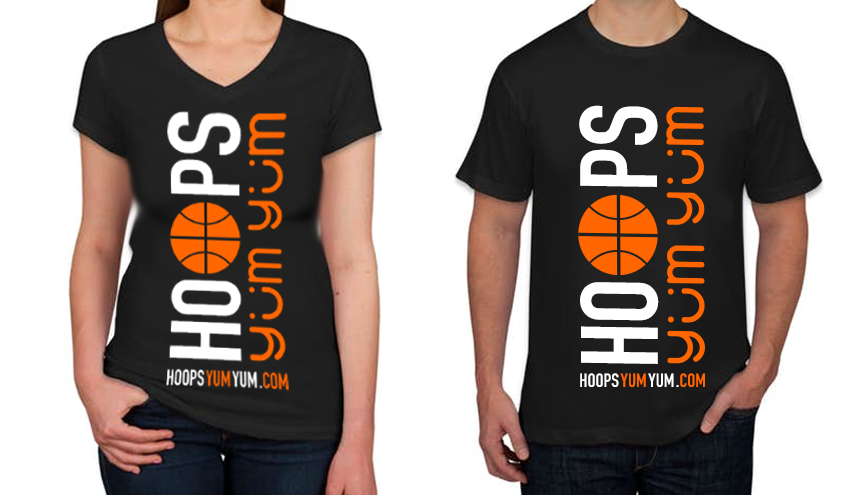
<style>
.page{position:relative;width:857px;height:495px;background:#ffffff}
.page>*{position:absolute;margin:0}
.t1{font:107.5px "DINCondensed-Bold";color:#ffffff;text-transform:uppercase}
.t2{font:19px "DINCondensed-Bold";color:#ffffff;text-transform:uppercase}
.t3{font:19px "DINCondensed-Bold";color:#ff6600;text-transform:uppercase}
</style>
<div class="page">
<p class="t1" style="left:579px;top:105px;width:80px;height:259px;rotate:-90deg">Ho     ps</p>
<p class="t2" style="left:580px;top:373px;width:125px;height:14px">hoops<span class="t3">Yum</span>Yum.<span class="t3">com</span></p>
</div>
